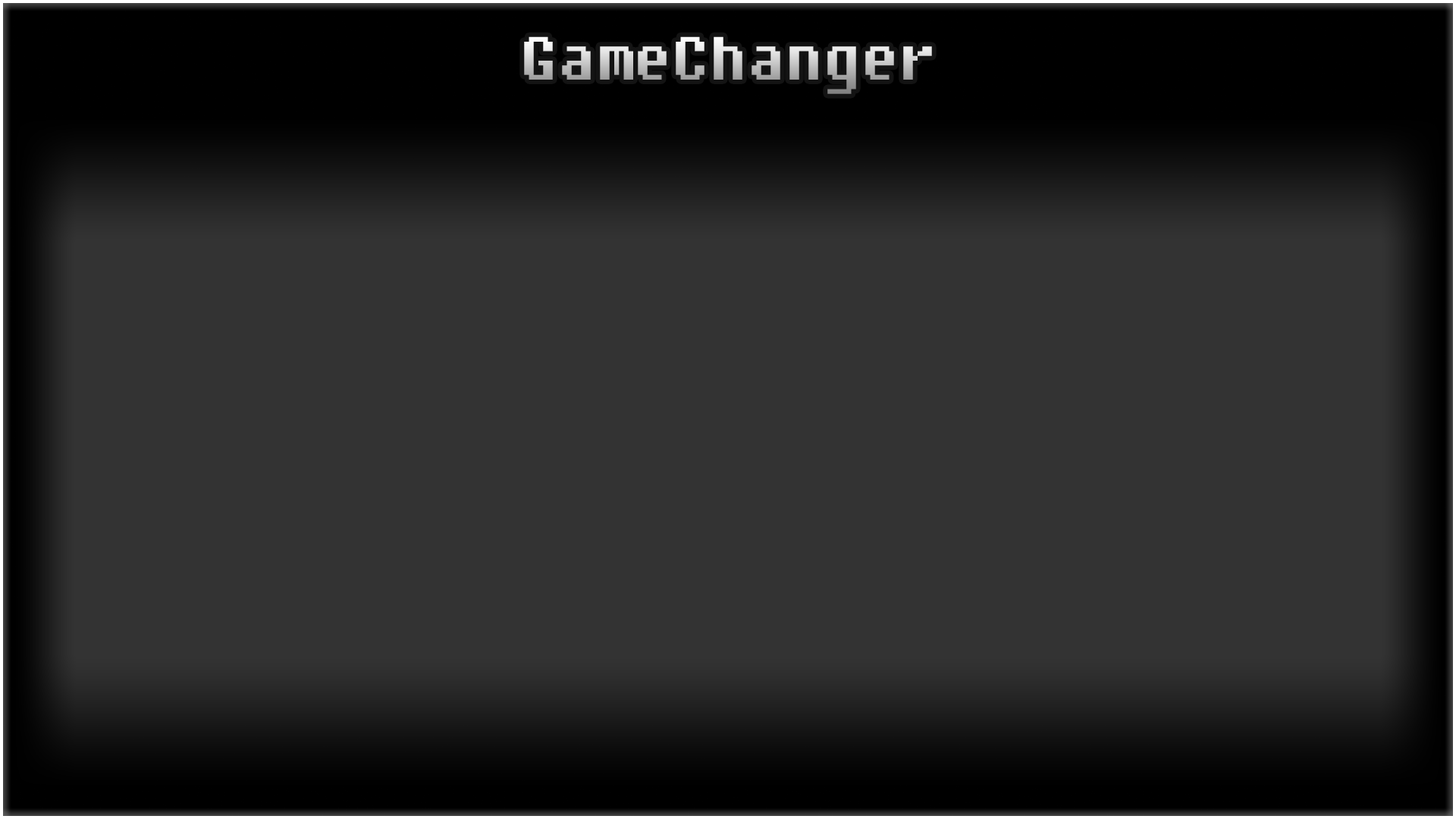
<style>
.page{position:relative;width:1456px;height:819px;background:#333333}
.page>*{position:absolute;margin:0}
.t1{font:60.7px "Fixedsys"}
</style>
<div class="page">
<p class="t1" style="left:524px;top:36px;width:408px;height:58px">GameChanger</p>
</div>
